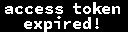
<style>
.page{position:relative;width:128px;height:32px;background:#000000}
.page>*{position:absolute;margin:0}
.t1{font:16.7px/15px "SourceCodePro-Bold";color:#ffffff}
</style>
<div class="page">
<p class="t1" style="left:5px;top:2px;width:115px;height:30px;text-align:center">access token<br>expired!</p>
</div>
